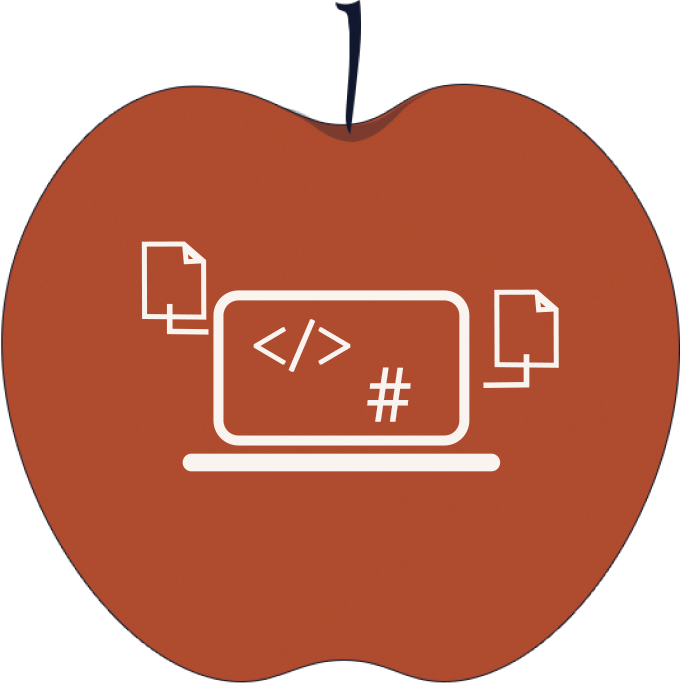
<style>
.page{position:relative;width:680px;height:686px;background:#ffffff}
.page>*{position:absolute;margin:0}
.t1{font:59.9px "VDL-V7Mincho-Light";letter-spacing:-0.025em;color:#f9f4ef;font-weight:bold}
.t2{font:67.3px "VDL-V7Mincho-Light";letter-spacing:-0.025em;color:#f9f4ef;font-weight:bold}
</style>
<div class="page">
<p class="t1" style="left:253px;top:319px;width:98px;height:53px">&lt;/&gt;</p>
<p class="t2" style="left:367px;top:367px;width:44px;height:55px">#</p>
</div>
